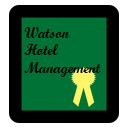
<style>
.page{position:relative;width:128px;height:128px;background:#007236}
.page>*{position:absolute;margin:0}
.t1{font:14.6px "ScriptMTBold";color:#000000}
</style>
<div class="page">
<p class="t1" style="left:24px;top:27px;width:77px;height:50px">Watson Hotel <br>Management</p>
</div>
